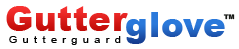
<style>
.page{position:relative;width:239px;height:49px;background:#ffffff}
.page>*{position:absolute;margin:0}
.t1{font:34.5px "Arial-Black";letter-spacing:0.01em;color:#d81c19}
.t2{font:34.5px "Arial-Black";letter-spacing:0.01em}
.t3{font:10.1px "ArialMT";letter-spacing:0.48em;color:#030303;scale:1.1 1}
</style>
<div class="page">
<p class="t1" style="left:6px;top:6px;width:122px;height:25px">Gutter</p>
<p class="t2" style="left:126px;top:12px;width:99px;height:32px">glove</p>
<p class="t3" style="left:9px;top:36px;width:112px;height:9px">Gutterguard</p>
</div>
